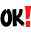
<style>
.page{position:relative;width:31px;height:34px;background:#ffffff}
.page>*{position:absolute;margin:0}
.t1{font:31.6px "Balloon";color:#fa1c16}
.t2{font:25.2px "Balloon";color:#000000}
.t3{font:24.1px "Balloon";color:#010101;scale:1.04 1}
</style>
<div class="page">
<p class="t1" style="left:25px;top:4px;width:7px;height:23px;rotate:-11deg">!</p>
<p class="t2" style="left:0px;top:8px;width:13px;height:19px;rotate:-18deg">O</p>
<p class="t3" style="left:12px;top:8px;width:13px;height:19px;rotate:-16deg">k</p>
</div>
